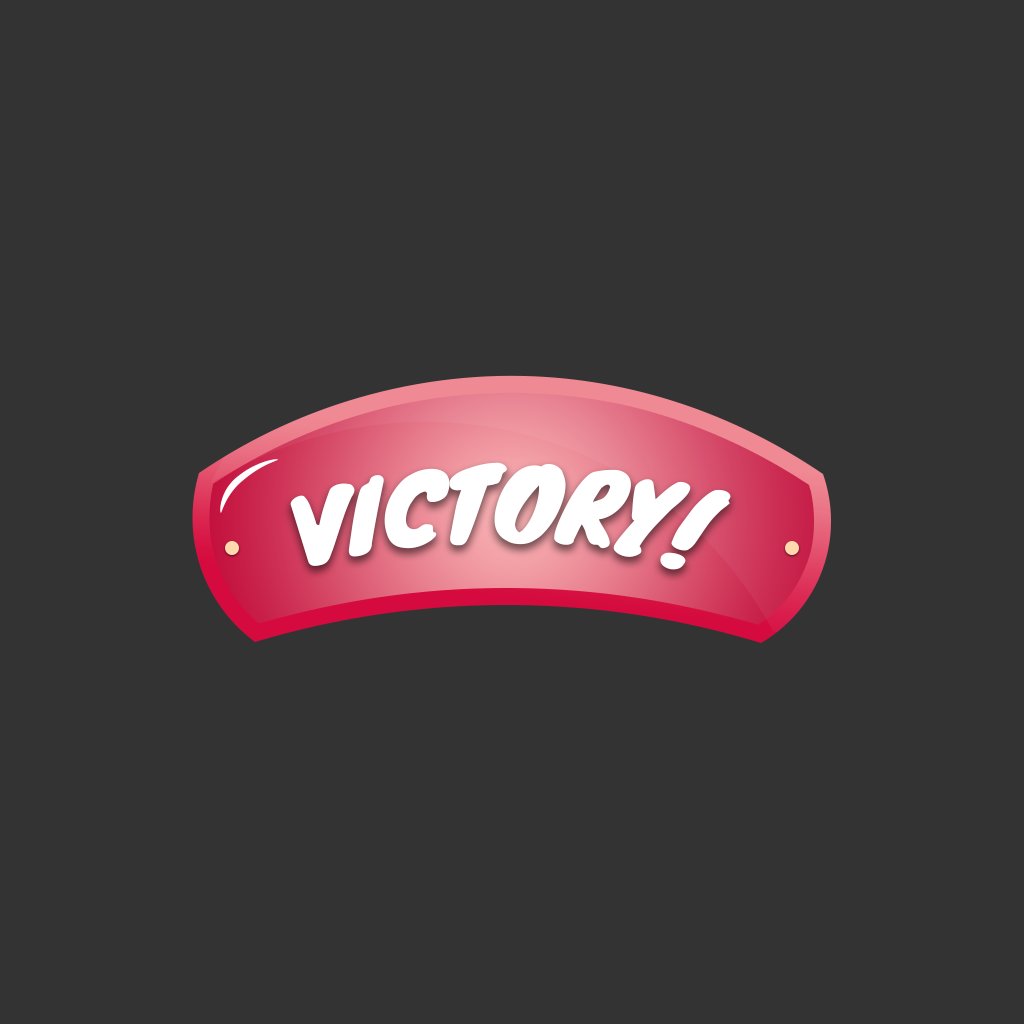
<style>
.page{position:relative;width:1024px;height:1024px;background:#333333}
.page>*{position:absolute;margin:0}
.t1{font:93.2px "Knewave-Regular";color:#ffffff}
</style>
<div class="page">
<p class="t1" style="left:290px;top:462px;width:441px;height:108px">VICTORY!</p>
</div>
